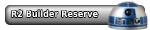
<style>
.page{position:relative;width:150px;height:30px;background:#ffffff}
.page>*{position:absolute;margin:0}
.t1{font:9px "DejaVuSansCondensed-Bold";color:#ffffff}
</style>
<div class="page">
<p class="t1" style="left:11px;top:10px;width:87px;height:8px">R2 Builder Reserve</p>
</div>
